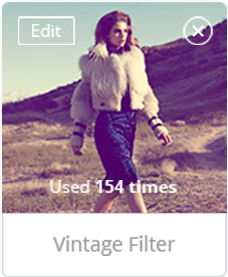
<style>
.page{position:relative;width:228px;height:277px}
.page>*{position:absolute;margin:0}
.t1{font:17.2px "OpenSans";color:#ffffff}
.t2{font:17.2px "OpenSans-Bold";color:#ffffff}
.t3{font:20px "OpenSans";color:#9c9b9b}
</style>
<div class="page">
<p class="t1" style="left:32px;top:24px;width:30px;height:13px">Edit</p>
<p class="t2" style="left:50px;top:180px;width:127px;height:13px"><span class="t1">Used </span>154 times</p>
<p class="t3" style="left:53px;top:235px;width:124px;height:21px">Vintage Filter</p>
</div>
